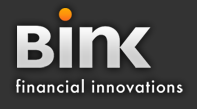
<style>
.page{position:relative;width:197px;height:109px;background:#333333}
.page>*{position:absolute;margin:0}
.t1{font:16.4px "Futura-Medium";letter-spacing:0.05em;color:#ffffff}
</style>
<div class="page">
<p class="t1" style="left:16px;top:79px;width:167px;height:14px">financial innovations</p>
</div>
